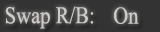
<style>
.page{position:relative;width:160px;height:32px;background:#333333}
.page>*{position:absolute;margin:0}
.t1{font:24px "TimesNewRomanPSMT";color:#cdcbc9;scale:0.86 1}
</style>
<div class="page">
<p class="t1" style="left:5px;top:6px;width:89px;height:23px">Swap R/B:</p>
<p class="t1" style="left:114px;top:7px;width:25px;height:17px">On</p>
</div>
